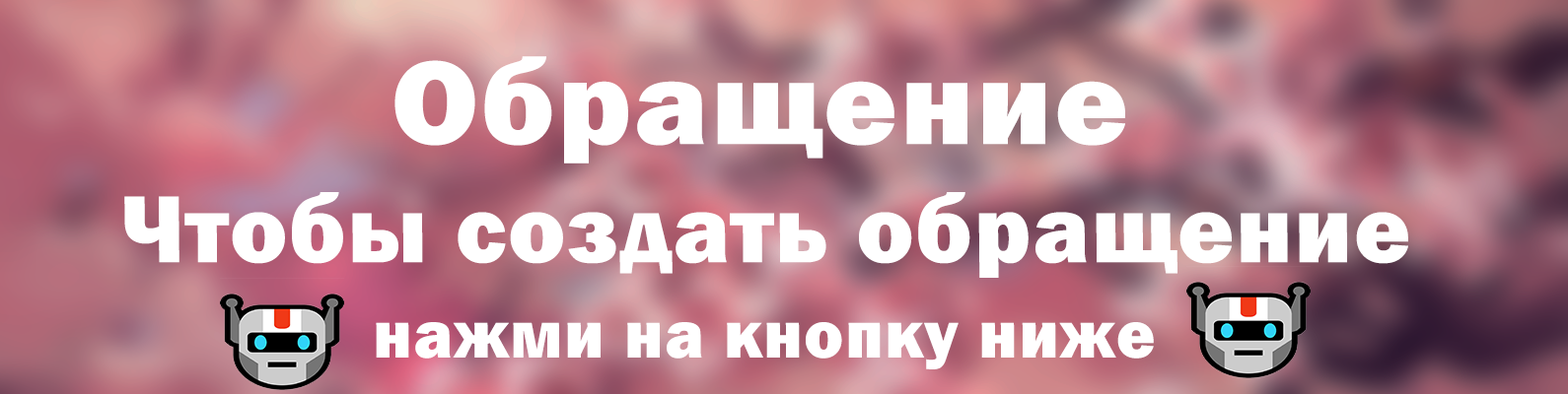
<style>
.page{position:relative;width:1568px;height:394px}
.page>*{position:absolute;margin:0}
.t1{font:123.4px "FranklinGothic-Heavy";letter-spacing:0.025em;color:#ffffff}
.t2{font:98.8px "FranklinGothic-Heavy";letter-spacing:0.025em;color:#ffffff}
.t3{font:70px "FranklinGothic-Heavy";letter-spacing:0.025em;color:#ffffff;scale:0.95 1}
</style>
<div class="page">
<p class="t1" style="left:394px;top:56px;width:731px;height:108px">Обращение</p>
<p class="t2" style="left:124px;top:192px;width:1284px;height:86px">Чтобы создать обращение</p>
<p class="t3" style="left:376px;top:322px;width:778px;height:48px">нажми на кнопку ниже</p>
</div>
